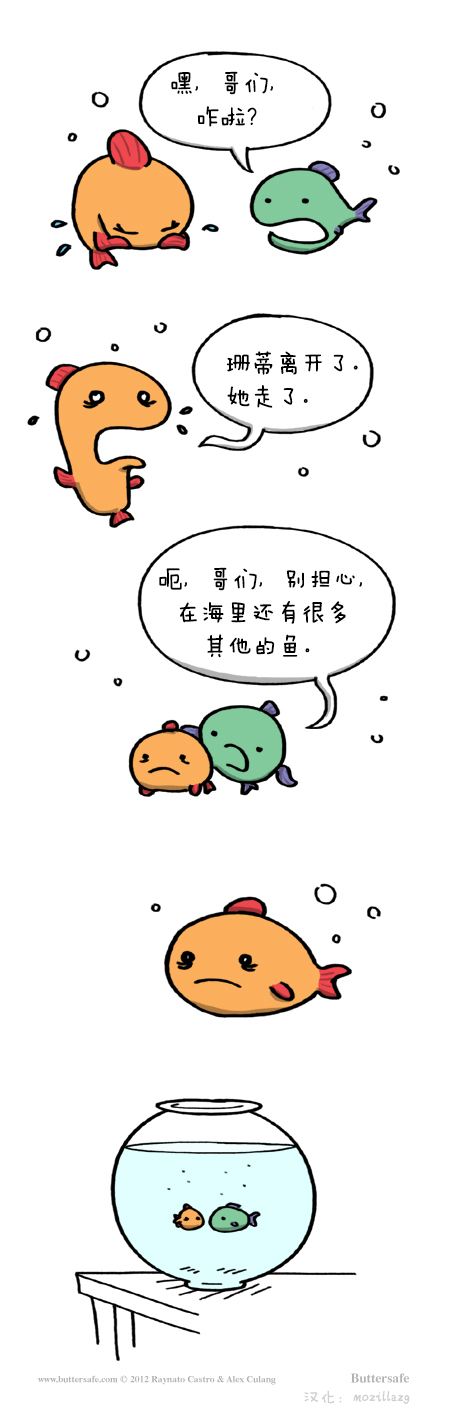
<style>
.page{position:relative;width:450px;height:1424px;background:#ffffff}
.page>*{position:absolute;margin:0}
.t1{font:25px/33.3px "FZMWJW--GB1-0";color:#000000}
.t2{font:16.7px "FZMWJW--GB1-0";color:#cfcfcf}
</style>
<div class="page">
<p class="t1" style="left:171px;top:71px;width:102px;height:56px">嘿，哥们，<br>   咋啦？</p>
<p class="t1" style="left:227px;top:351px;width:131px;height:57px">珊蒂离开了。<br>她走了。</p>
<p class="t1" style="left:159px;top:567px;width:203px;height:91px">呃，哥们，别担心，<br>  在海里还有很多<br>     其他的鱼。</p>
<p class="t2" style="left:304px;top:1390px;width:106px;height:14px">汉化：mozillazg</p>
</div>
